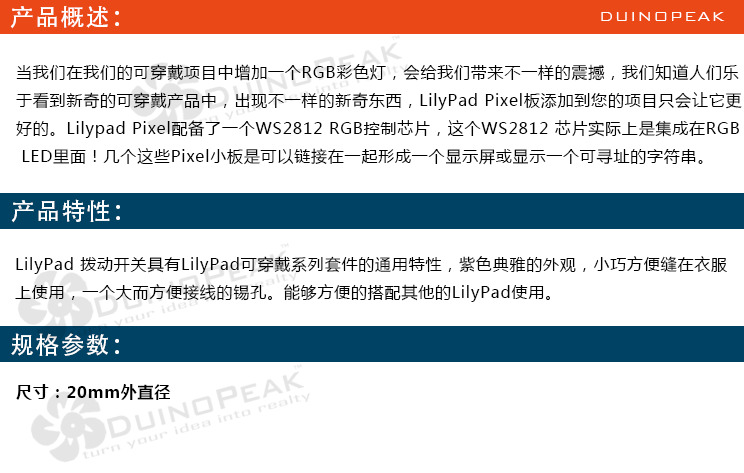
<style>
.page{position:relative;width:744px;height:473px;background:#ffffff}
.page>*{position:absolute;margin:0}
.t1{font:24px "AdobeHeitiStd-Regular";letter-spacing:0.05em;color:#ffffff}
.t2{font:18px "BankGothicBT-Light";letter-spacing:0.05em;color:#ffffff}
.t3{font:16px "MicrosoftYaHei";letter-spacing:0.05em;color:#000000}
.t4{font:16px "MicrosoftYaHei-Bold";letter-spacing:0.05em;color:#000000}
</style>
<div class="page">
<p class="t1" style="left:10px;top:6px;width:109px;height:23px">产品概述：</p>
<p class="t2" style="left:601px;top:12px;width:124px;height:9px">DUINOPEAK</p>
<p class="t3" style="left:16px;top:64px;width:726px;height:101px">当我们在我们的可穿戴项目中增加一个RGB彩色灯，会给我们带来不一样的震撼，我们知道人们乐<br>于看到新奇的可穿戴产品中，出现不一样的新奇东西，LilyPad Pixel板添加到您的项目只会让它更<br>好的。Lilypad Pixel配备了一个WS2812 RGB控制芯片，这个WS2812 芯片实际上是集成在RGB<br> LED里面！几个这些Pixel小板是可以链接在一起形成一个显示屏或显示一个可寻址的字符串。</p>
<p class="t1" style="left:11px;top:199px;width:109px;height:24px">产品特性：</p>
<p class="t3" style="left:15px;top:256px;width:712px;height:46px">LilyPad 拨动开关具有LilyPad可穿戴系列套件的通用特性，紫色典雅的外观，小巧方便缝在衣服<br>上使用，一个大而方便接线的锡孔。能够方便的搭配其他的LilyPad使用。</p>
<p class="t1" style="left:11px;top:333px;width:108px;height:23px">规格参数：</p>
<p class="t4" style="left:16px;top:384px;width:155px;height:16px">尺寸：20mm外直径</p>
</div>
